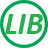
<style>
.page{position:relative;width:48px;height:48px;background:#ffffff}
.page>*{position:absolute;margin:0}
.t1{font:31.2px "Calibri-BoldItalic";color:#22b14c}
</style>
<div class="page">
<p class="t1" style="left:5px;top:14px;width:38px;height:20px">LIB</p>
</div>
